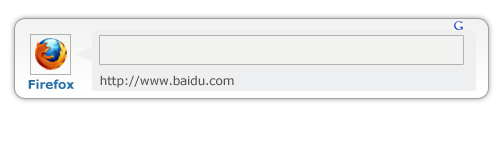
<style>
.page{position:relative;width:500px;height:142px;background:#ffffff}
.page>*{position:absolute;margin:0}
.t1{font:12px "Verdana";letter-spacing:-0.01em;color:#585755}
.t2{font:12px "Verdana-Bold";letter-spacing:-0.01em;color:#286fa6}
</style>
<div class="page">
<p class="t1" style="left:100px;top:75px;width:134px;height:13px">http://www.baidu.com</p>
<p class="t2" style="left:28px;top:79px;width:46px;height:10px">Firefox</p>
</div>
